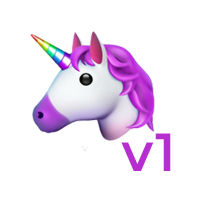
<style>
.page{position:relative;width:200px;height:200px;background:#ffffff}
.page>*{position:absolute;margin:0}
.t1{font:53.5px "Montserrat-Regular";color:#b72ed0;scale:1.07 1}
</style>
<div class="page">
<p class="t1" style="left:121px;top:133px;width:50px;height:38px">v1</p>
</div>
